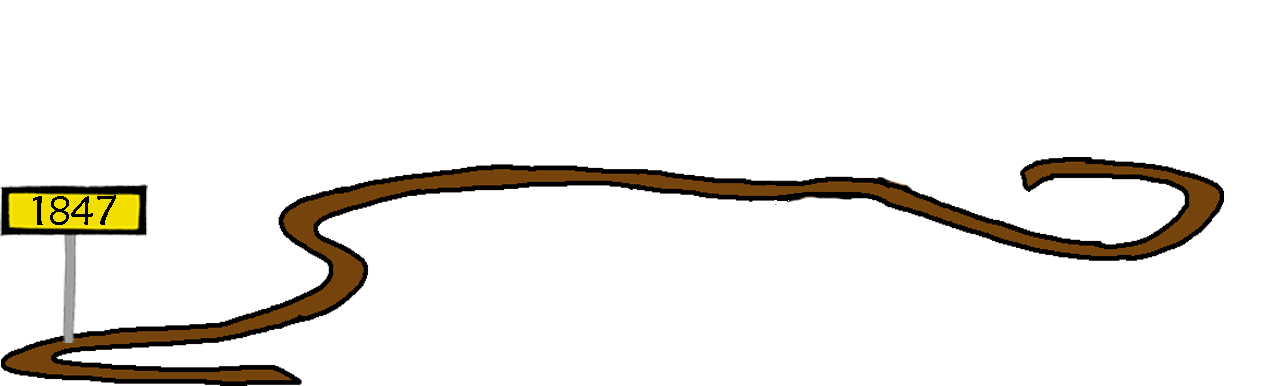
<style>
.page{position:relative;width:1278px;height:386px;background:#ffffff}
.page>*{position:absolute;margin:0}
.t1{font:41.7px "MaiandraGD-Regular";color:#000000}
</style>
<div class="page">
<p class="t1" style="left:33px;top:195px;width:83px;height:30px">1847</p>
</div>
